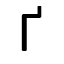
<style>
.page{position:relative;width:64px;height:64px;background:#ffffff}
.page>*{position:absolute;margin:0}
.t1{font:58.3px "Calibri";color:#000000}
</style>
<div class="page">
<p class="t1" style="left:21px;top:6px;width:21px;height:45px">Ґ</p>
</div>
